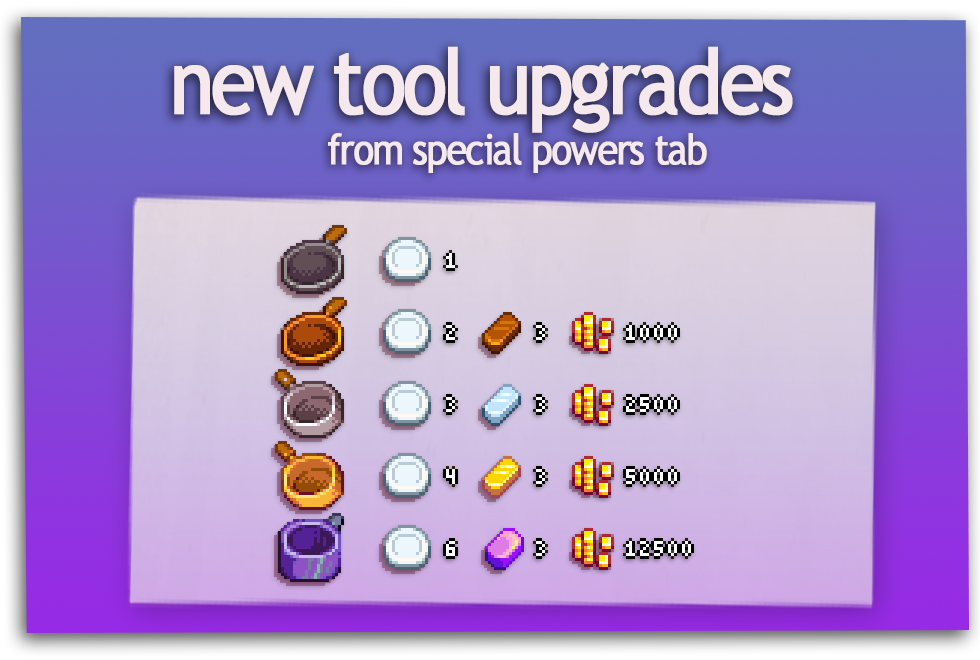
<style>
.page{position:relative;width:980px;height:660px}
.page>*{position:absolute;margin:0}
.t1{font:90px "TrebuchetMS";letter-spacing:-0.06em;color:#f5e9ee;font-weight:bold;scale:0.9 1}
.t2{font:42px "TrebuchetMS";letter-spacing:-0.06em;color:#f5e9ee;font-weight:bold;scale:0.9 1}
</style>
<div class="page">
<p class="t1" style="left:174px;top:46px;width:619px;height:87px">new tool upgrades</p>
<p class="t2" style="left:328px;top:133px;width:379px;height:40px">from special powers tab</p>
</div>
